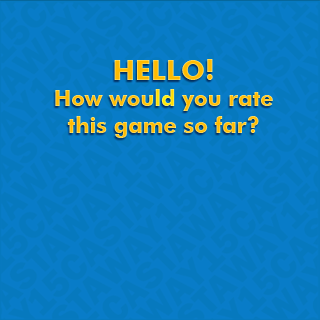
<style>
.page{position:relative;width:320px;height:320px;background:#0679be}
.page>*{position:absolute;margin:0}
.t1{font:21.9px "FuturaBT-Bold"}
.t2{font:28.1px "FuturaBT-Bold"}
</style>
<div class="page">
<p class="t1" style="left:55px;top:59px;width:218px;height:79px;text-align:center"><span class="t2">HELLO!<br></span>How would you rate this game so far?</p>
</div>
